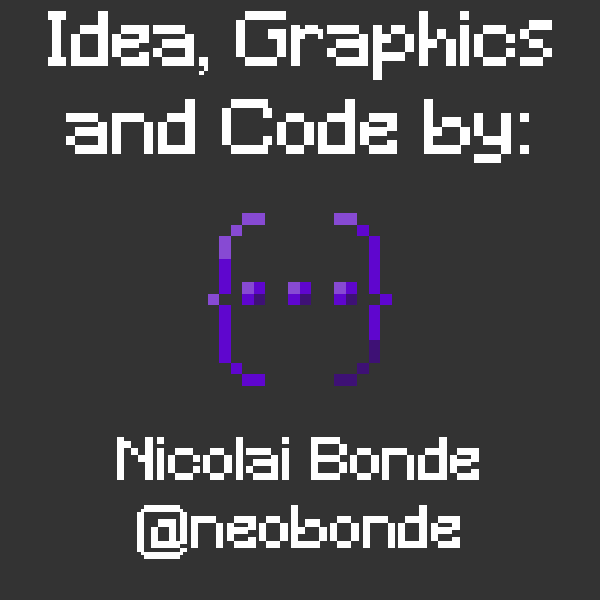
<style>
.page{position:relative;width:600px;height:600px;background:#333333}
.page>*{position:absolute;margin:0}
.t1{font:73.3px "Minecraft";color:#ffffff}
.t2{font:57.3px "Minecraft";color:#ffffff}
</style>
<div class="page">
<p class="t1" style="left:48px;top:11px;width:504px;height:152px;text-align:center">Idea, Graphics and Code by:</p>
<p class="t2" style="left:117px;top:437px;width:362px;height:122px;text-align:center">Nicolai Bonde<br>@neobonde</p>
</div>
